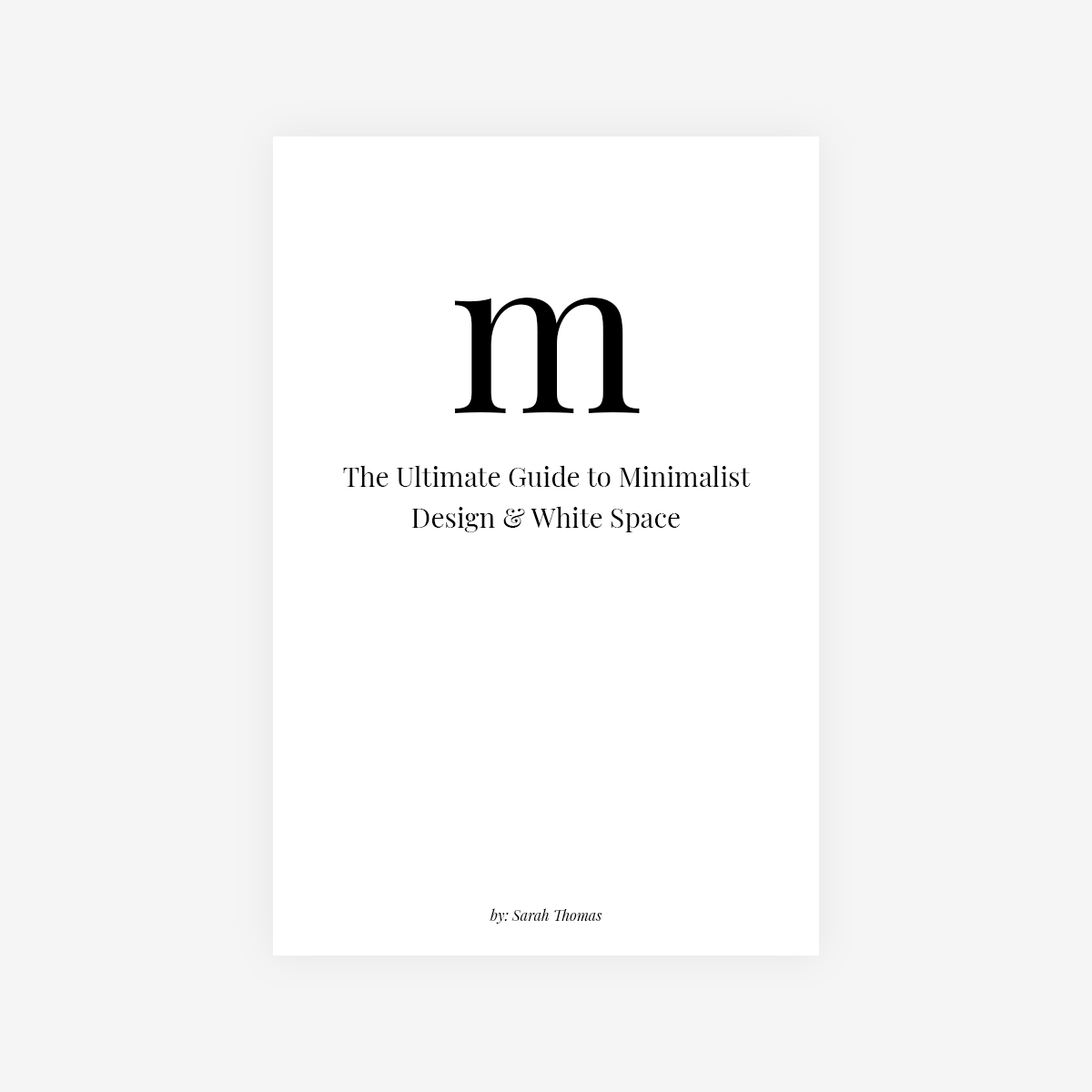
<style>
.page{position:relative;width:1092px;height:1092px;background:#f5f5f5}
.page>*{position:absolute;margin:0}
.t1{font:218.4px "PlayfairDisplay-Regular";color:#000000}
.t2{font:27.3px/40.9px "PlayfairDisplay-Regular";color:#000000}
.t3{font:14.6px/32.8px "PlayfairDisplay-Italic";color:#000000}
</style>
<div class="page">
<p class="t1" style="left:454px;top:298px;width:186px;height:115px">m</p>
<p class="t2" style="left:343px;top:465px;width:408px;height:459px;text-align:center"><span class="t1"><br><br></span>The Ultimate Guide to Minimalist<br>Design &amp; White Space<br><br><br><br><br><br><br><br><br><br><br><span class="t3"><br>by: Sarah Thomas</span></p>
</div>
